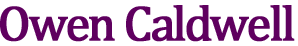
<style>
.page{position:relative;width:298px;height:46px;background:#ffffff}
.page>*{position:absolute;margin:0}
.t1{font:50px "CambriaMath";letter-spacing:-0.06em;color:#5f005f;font-weight:bold}
</style>
<div class="page">
<p class="t1" style="left:0px;top:5px;width:295px;height:37px">Owen Caldwell</p>
</div>
